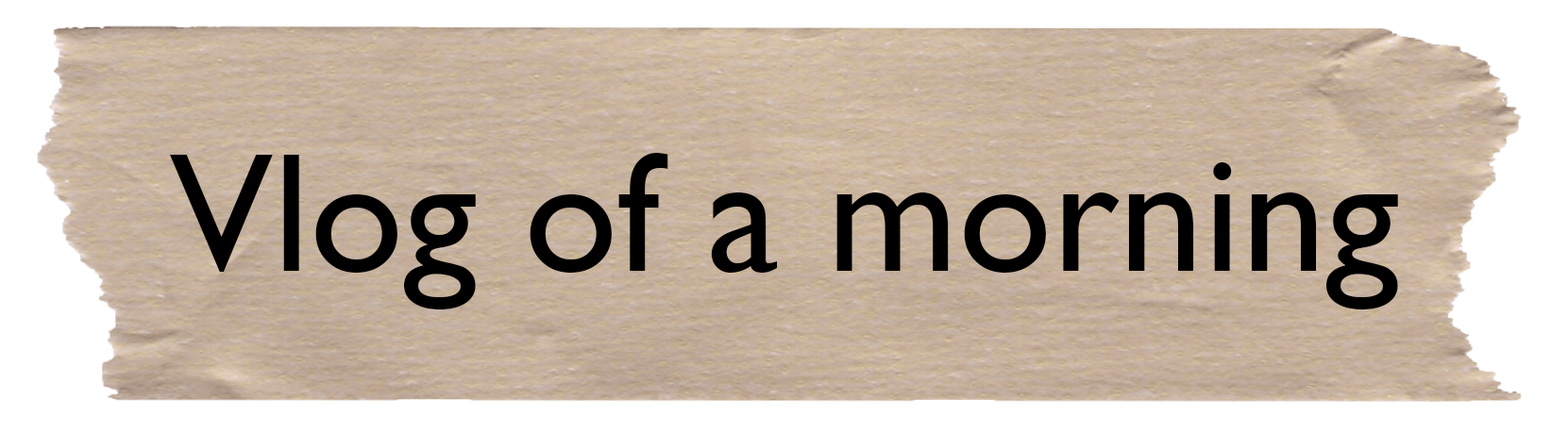
<style>
.page{position:relative;width:1568px;height:434px;background:#ffffff}
.page>*{position:absolute;margin:0}
.t1{font:169.9px "GillSansMT";color:#000000}
</style>
<div class="page">
<p class="t1" style="left:170px;top:153px;width:1228px;height:157px">Vlog of a morning</p>
</div>
